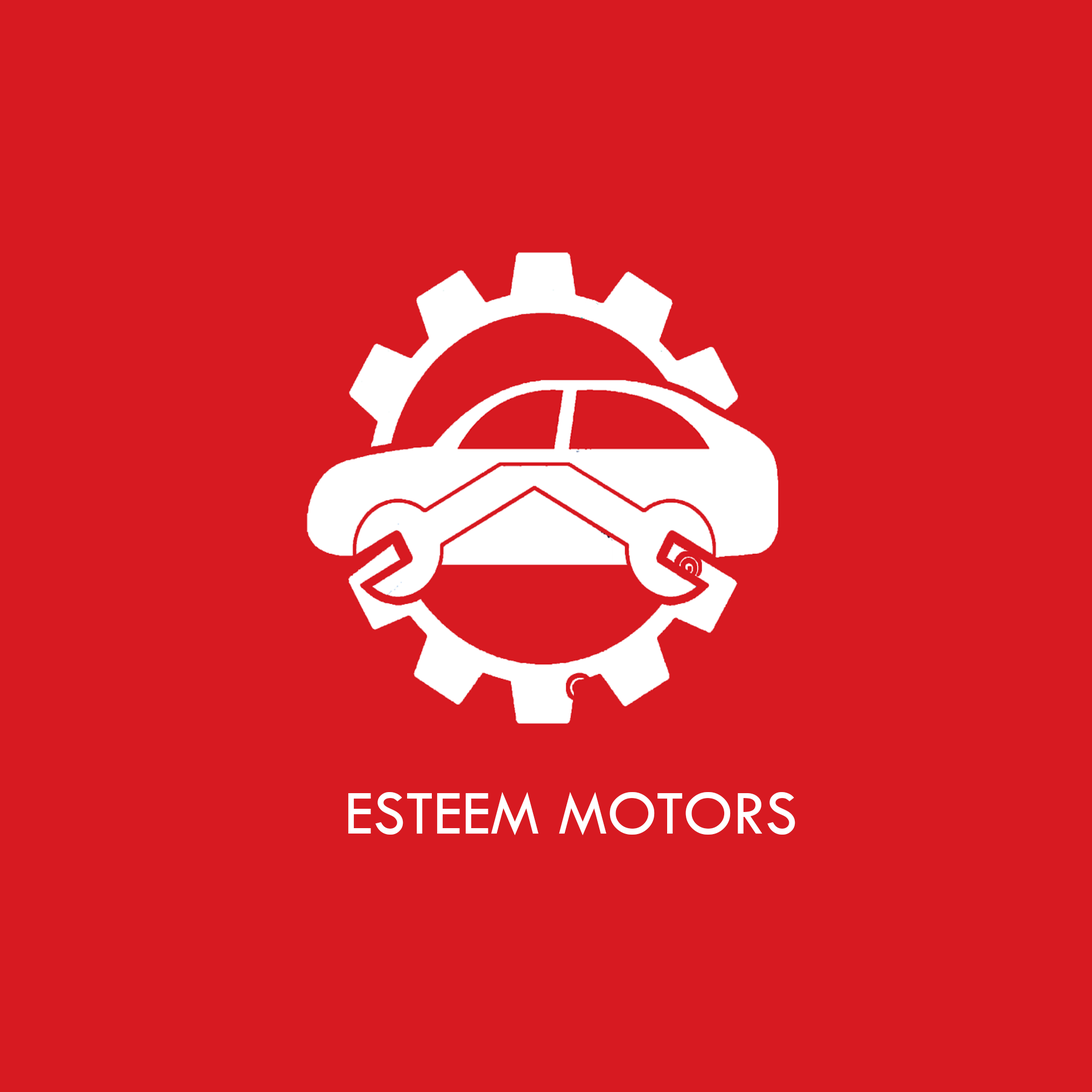
<style>
.page{position:relative;width:1092px;height:1092px;background:#d71a21}
.page>*{position:absolute;margin:0}
.t1{font:64.6px "TwCenMT-Regular";color:#ffffff}
</style>
<div class="page">
<p class="t1" style="left:348px;top:792px;width:447px;height:43px">ESTEEM MOTORS</p>
</div>
